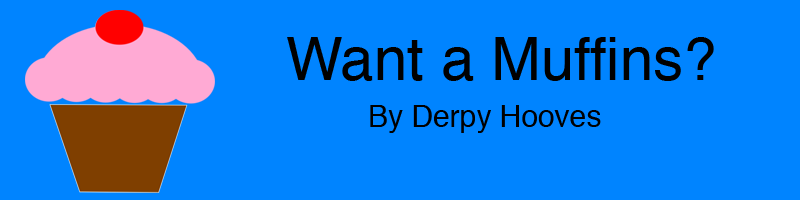
<style>
.page{position:relative;width:800px;height:200px;background:#0084ff}
.page>*{position:absolute;margin:0}
.t1{font:60px "Helvetica";color:#000000}
.t2{font:30px "Helvetica";color:#000000}
</style>
<div class="page">
<p class="t1" style="left:287px;top:37px;width:427px;height:44px">Want a Muffins?</p>
<p class="t2" style="left:370px;top:105px;width:231px;height:28px">By Derpy Hooves</p>
</div>
